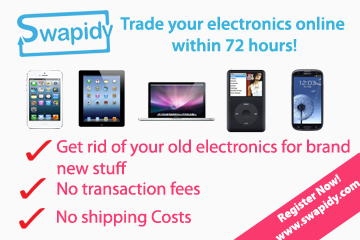
<style>
.page{position:relative;width:360px;height:240px;background:#fafafa}
.page>*{position:absolute;margin:0}
.t1{font:18px "MyriadPro-Semibold";color:#38b4de}
.t2{font:18px "MyriadPro-Regular";color:#fa3a6e}
.t3{font:12px "MyriadPro-Bold";color:#ffffff}
</style>
<div class="page">
<p class="t1" style="left:120px;top:16px;width:225px;height:36px;text-align:center">Trade your electronics online <br>within 72 hours!</p>
<p class="t2" style="left:57px;top:139px;width:293px;height:36px">Get rid of your old electronics for brand<br>new stuff</p>
<p class="t3" style="left:275px;top:174px;width:86px;height:67px;text-align:center;rotate:-35deg">Register Now!<br>www.swapidy.com</p>
<p class="t2" style="left:57px;top:181px;width:143px;height:14px">No transaction fees</p>
<p class="t2" style="left:57px;top:209px;width:134px;height:18px">No shipping Costs</p>
</div>
